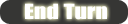
<style>
.page{position:relative;width:128px;height:24px;background:#363634}
.page>*{position:absolute;margin:0}
.t1{font:19.2px "Impact";color:#ffffff;scale:1.25 1}
</style>
<div class="page">
<p class="t1" style="left:25px;top:3px;width:82px;height:17px">End Turn</p>
</div>
